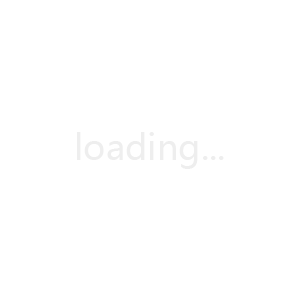
<style>
.page{position:relative;width:300px;height:300px;background:#ffffff}
.page>*{position:absolute;margin:0}
.t1{font:35px "MicrosoftYaHei";color:#eeeeee}
</style>
<div class="page">
<p class="t1" style="left:77px;top:132px;width:147px;height:37px">loading...</p>
</div>
